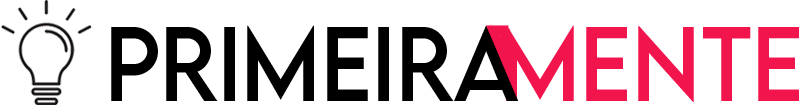
<style>
.page{position:relative;width:800px;height:105px;background:#ffffff}
.page>*{position:absolute;margin:0}
.t1{font:93.5px "LEMONMILK-Regular";color:#000000;scale:0.92 1}
.t2{font:93.5px "LEMONMILK-Regular";color:#f1144d;scale:0.93 1}
</style>
<div class="page">
<p class="t1" style="left:111px;top:25px;width:408px;height:76px">Primeira</p>
<p class="t2" style="left:506px;top:25px;width:293px;height:77px">mente</p>
</div>
